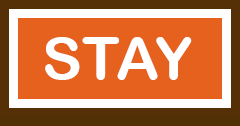
<style>
.page{position:relative;width:240px;height:126px;background:#e6611d}
.page>*{position:absolute;margin:0}
.t1{font:60px "ArialRoundedMTBold";color:#ffffff}
</style>
<div class="page">
<p class="t1" style="left:45px;top:37px;width:147px;height:43px">STAY</p>
</div>
